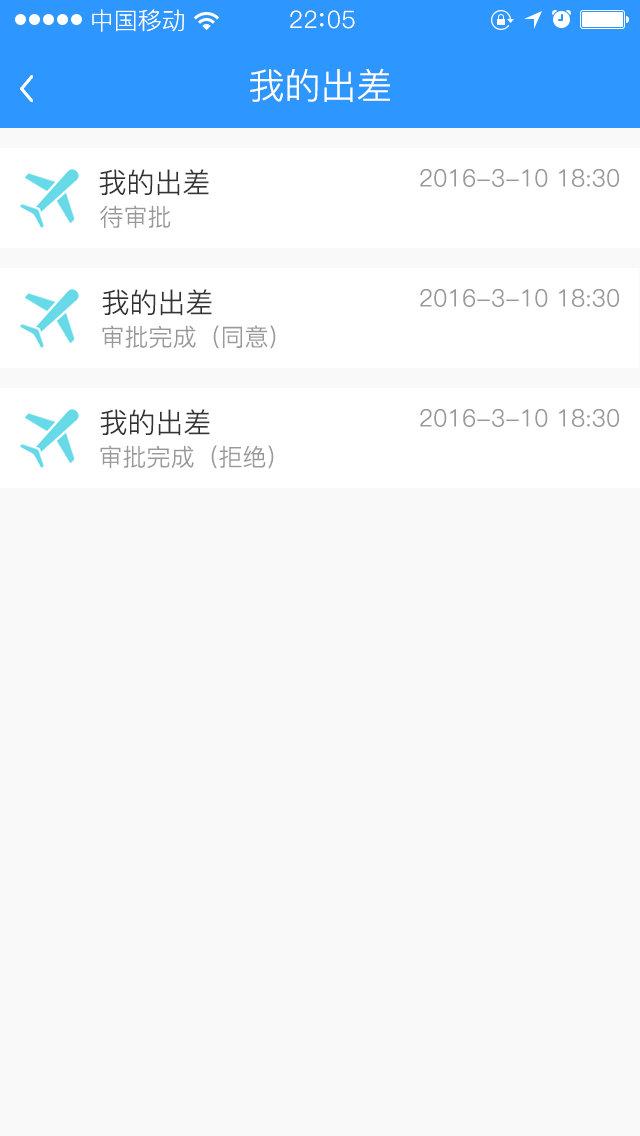
<style>
.page{position:relative;width:640px;height:1136px;background:#f9f9f9}
.page>*{position:absolute;margin:0}
.t1{font:24px "PingFang-SC-Regular";color:#ffffff}
.t2{font:24px "PingFang-SC-Regular";letter-spacing:0.03em;color:#ffffff}
.t3{font:36px "PingFang-SC-Regular";color:#ffffff}
.t4{font:28px "PingFang-SC-Regular";color:#333333}
.t5{font:24px "PingFang-SC-Regular";color:#999999}
</style>
<div class="page">
<p class="t1" style="left:92px;top:9px;width:92px;height:23px">中国移动</p>
<p class="t2" style="left:290px;top:10px;width:65px;height:19px">22 05</p>
<p class="t3" style="left:250px;top:68px;width:140px;height:34px">我的出差</p>
<p class="t4" style="left:99px;top:169px;width:110px;height:27px">我的出差</p>
<p class="t5" style="left:420px;top:169px;width:199px;height:18px">2016-3-10 18:30</p>
<p class="t5" style="left:100px;top:205px;width:71px;height:23px">待审批</p>
<p class="t4" style="left:102px;top:289px;width:110px;height:27px">我的出差</p>
<p class="t5" style="left:420px;top:289px;width:199px;height:18px">2016-3-10 18:30</p>
<p class="t5" style="left:102px;top:325px;width:174px;height:24px">审批完成（同意）</p>
<p class="t4" style="left:100px;top:409px;width:110px;height:27px">我的出差</p>
<p class="t5" style="left:420px;top:409px;width:199px;height:18px">2016-3-10 18:30</p>
<p class="t5" style="left:100px;top:445px;width:174px;height:24px">审批完成（拒绝）</p>
</div>
